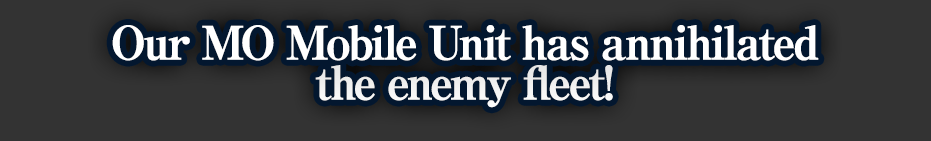
<style>
.page{position:relative;width:931px;height:141px;background:#333333}
.page>*{position:absolute;margin:0}
.t1{font:46px/40px "RyuminPro-ExBold";letter-spacing:-0.08em;color:#ffffff;font-weight:bold}
</style>
<div class="page">
<p class="t1" style="left:112px;top:25px;width:707px;height:83px;text-align:center">Our MO Mobile Unit has annihilated<br>the enemy fleet!</p>
</div>
